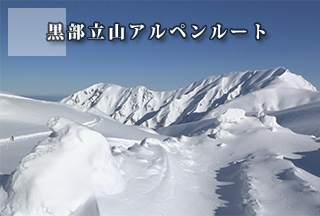
<style>
.page{position:relative;width:320px;height:216px}
.page>*{position:absolute;margin:0}
.t1{font:17px "KozMinPr6N-Heavy";letter-spacing:0.2em;color:#ffffff}
</style>
<div class="page">
<p class="t1" style="left:47px;top:23px;width:218px;height:17px">黒部立山アルペンルート</p>
</div>
